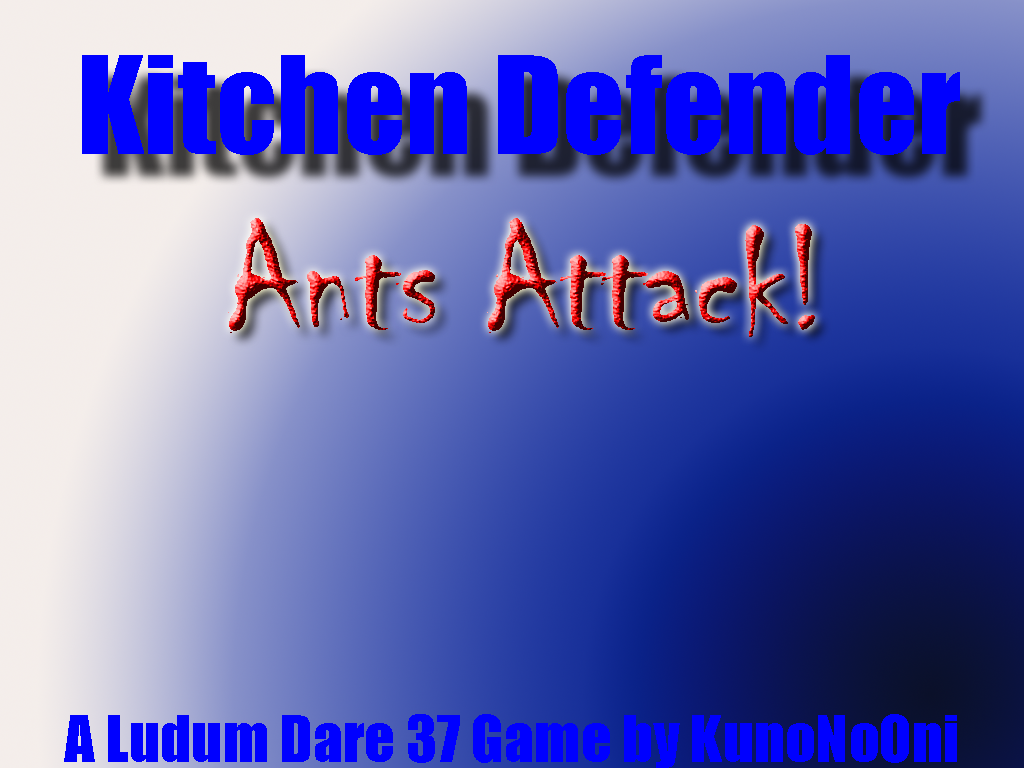
<style>
.page{position:relative;width:1024px;height:768px}
.page>*{position:absolute;margin:0}
.t1{font:155.4px "Chiller-Regular"}
.t2{font:60px "Impact";color:#0000ff}
</style>
<div class="page">
<p class="t1" style="left:228px;top:218px;width:587px;height:119px">Ants Attack!</p>
<p class="t2" style="left:64px;top:714px;width:893px;height:54px">A Ludum Dare 37 Game by KunoNoOni</p>
</div>
